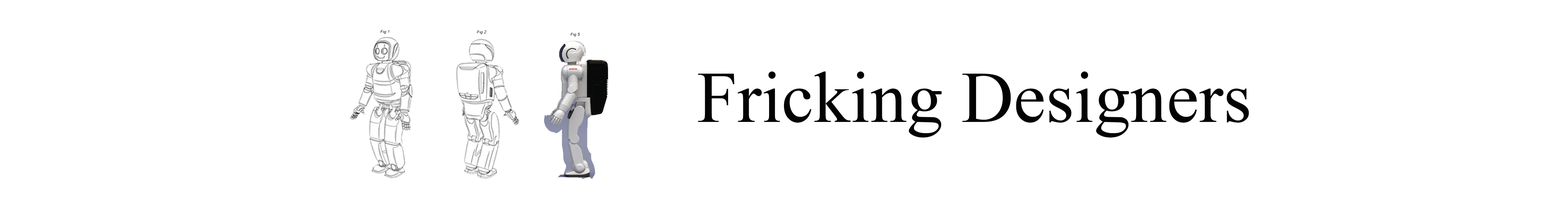
<style>
.page{position:relative;width:1568px;height:209px;background:#ffffff}
.page>*{position:absolute;margin:0}
.t1{font:72.6px "TimesNewRomanPSMT";color:#030303}
</style>
<div class="page">
<p class="t1" style="left:698px;top:72px;width:551px;height:66px">Fricking Designers</p>
</div>
